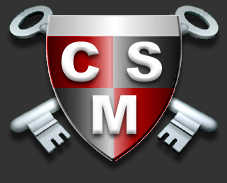
<style>
.page{position:relative;width:227px;height:183px;background:#333333}
.page>*{position:absolute;margin:0}
.t1{font:54px "Arial-Black";letter-spacing:0.04em;color:#fffefe}
</style>
<div class="page">
<p class="t1" style="left:61px;top:41px;width:39px;height:41px">C</p>
<p class="t1" style="left:126px;top:41px;width:36px;height:41px">S</p>
<p class="t1" style="left:92px;top:95px;width:45px;height:39px">M</p>
</div>
